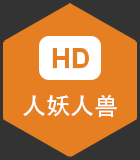
<style>
.page{position:relative;width:140px;height:160px;background:#e67e22}
.page>*{position:absolute;margin:0}
.t1{font:24px "AdobeHeitiStd-Regular";color:#ffffff}
</style>
<div class="page">
<p class="t1" style="left:23px;top:94px;width:94px;height:23px">人妖人兽</p>
</div>
